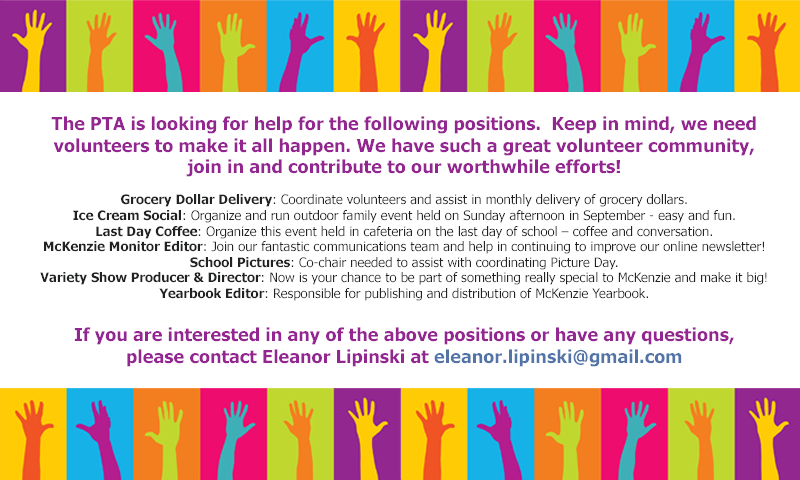
<style>
.page{position:relative;width:800px;height:480px;background:#ffffff}
.page>*{position:absolute;margin:0}
.t1{font:18px "Tahoma-Bold";color:#92278f}
.t2{font:13px "Tahoma-Bold";color:#212222}
.t3{font:13px "Tahoma";color:#212222}
.t4{font:18px "Tahoma-Bold";color:#5474a7}
</style>
<div class="page">
<p class="t1" style="left:40px;top:116px;width:727px;height:251px;text-align:center">The PTA is looking for help for the following positions.  Keep in mind, we need<br>volunteers to make it all happen. We have such a great volunteer community,<br>join in and contribute to our worthwhile efforts!<br><br><span class="t2">Grocery Dollar Delivery</span><span class="t3">: Coordinate volunteers and assist in monthly delivery of grocery dollars.<br></span><span class="t2">Ice Cream Social</span><span class="t3">: Organize and run outdoor family event held on Sunday afternoon in September - easy and fun.<br></span><span class="t2">Last Day Coffee</span><span class="t3">: Organize this event held in cafeteria on the last day of school – coffee and conversation.<br></span><span class="t2">McKenzie Monitor Editor</span><span class="t3">: Join our fantastic communications team and help in continuing to improve our online newsletter!<br></span><span class="t2">School Pictures</span><span class="t3">: Co-chair needed to assist with coordinating Picture Day.<br></span><span class="t2">Variety Show Producer &amp; Director</span><span class="t3">: Now is your chance to be part of something really special to McKenzie and make it big!<br></span><span class="t2">Yearbook Editor</span><span class="t3">: Responsible for publishing and distribution of McKenzie Yearbook.<br><br></span>If you are interested in any of the above positions or have any questions,<br>please contact Eleanor Lipinski at <span class="t4">eleanor.lipinski@gmail.com</span></p>
</div>
